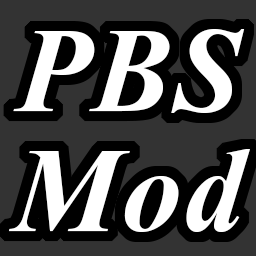
<style>
.page{position:relative;width:256px;height:256px;background:#000000}
.page>*{position:absolute;margin:0}
.t1{font:120px/40px "TimesNewRomanPS-BoldItalicMT";letter-spacing:0.015em;color:#ffffff}
</style>
<div class="page">
<p class="t1" style="left:8px;top:29px;width:242px;height:203px;text-align:center">PBS<br><br><br>Mod</p>
</div>
